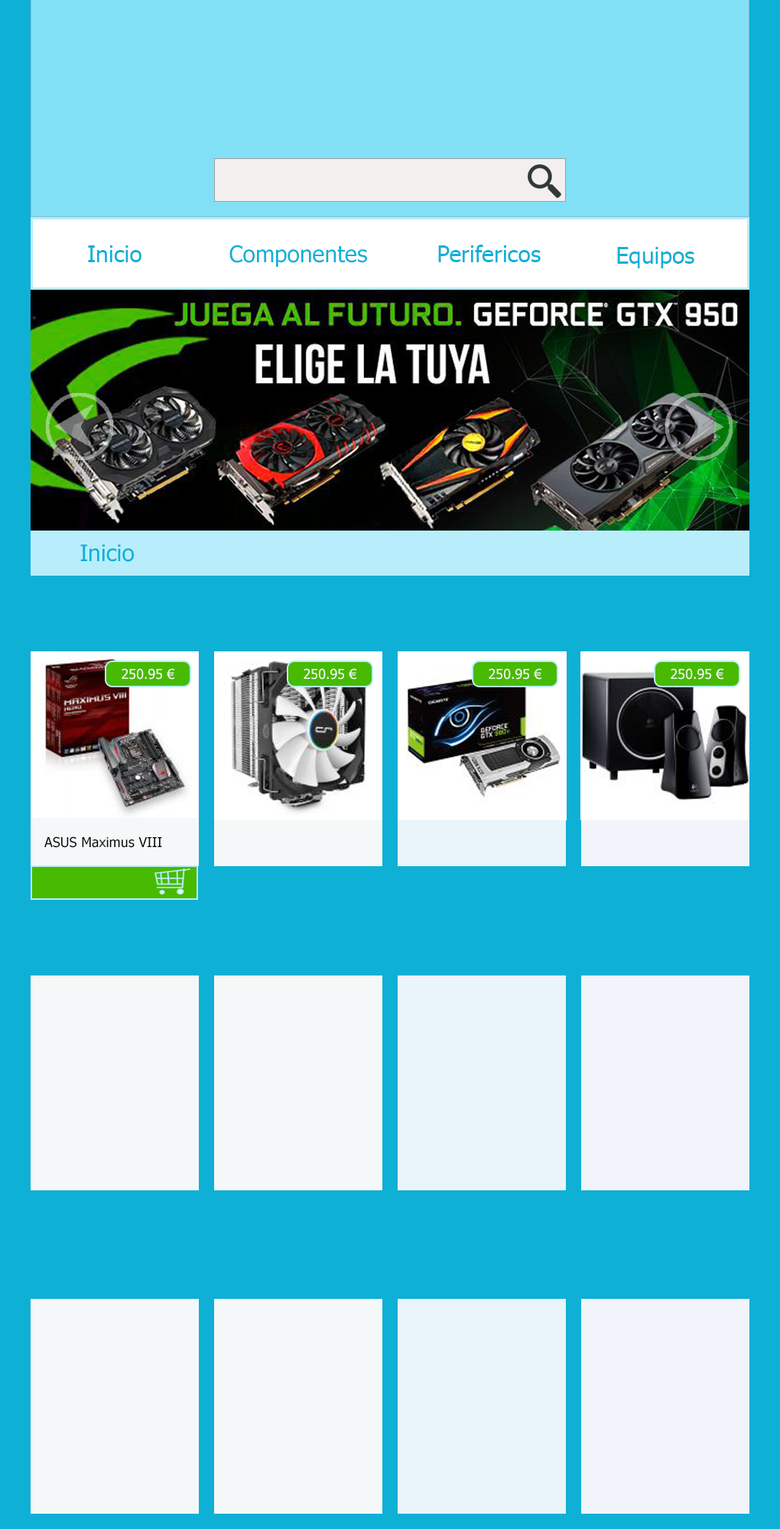
<style>
.page{position:relative;width:780px;height:1529px;background:#0fb0d6}
.page>*{position:absolute;margin:0}
.t1{font:23px "Tahoma";color:#0db0d6}
.t2{font:23px "Tahoma";color:#0fb0d6}
.t3{font:13.8px "Tahoma";color:#f5f7f3}
.t4{font:13.8px "Tahoma";color:#070707}
</style>
<div class="page">
<p class="t1" style="left:88px;top:245px;width:53px;height:17px">Inicio</p>
<p class="t1" style="left:229px;top:245px;width:138px;height:22px">Componentes</p>
<p class="t2" style="left:438px;top:245px;width:103px;height:17px">Perifericos</p>
<p class="t1" style="left:617px;top:247px;width:77px;height:21px">Equipos</p>
<p class="t1" style="left:80px;top:544px;width:54px;height:18px">Inicio</p>
<p class="t3" style="left:122px;top:668px;width:52px;height:12px">250.95 €</p>
<p class="t3" style="left:304px;top:668px;width:52px;height:12px">250.95 €</p>
<p class="t3" style="left:489px;top:668px;width:52px;height:12px">250.95 €</p>
<p class="t3" style="left:671px;top:668px;width:52px;height:12px">250.95 €</p>
<p class="t4" style="left:44px;top:836px;width:118px;height:12px">ASUS Maximus VIII</p>
</div>
